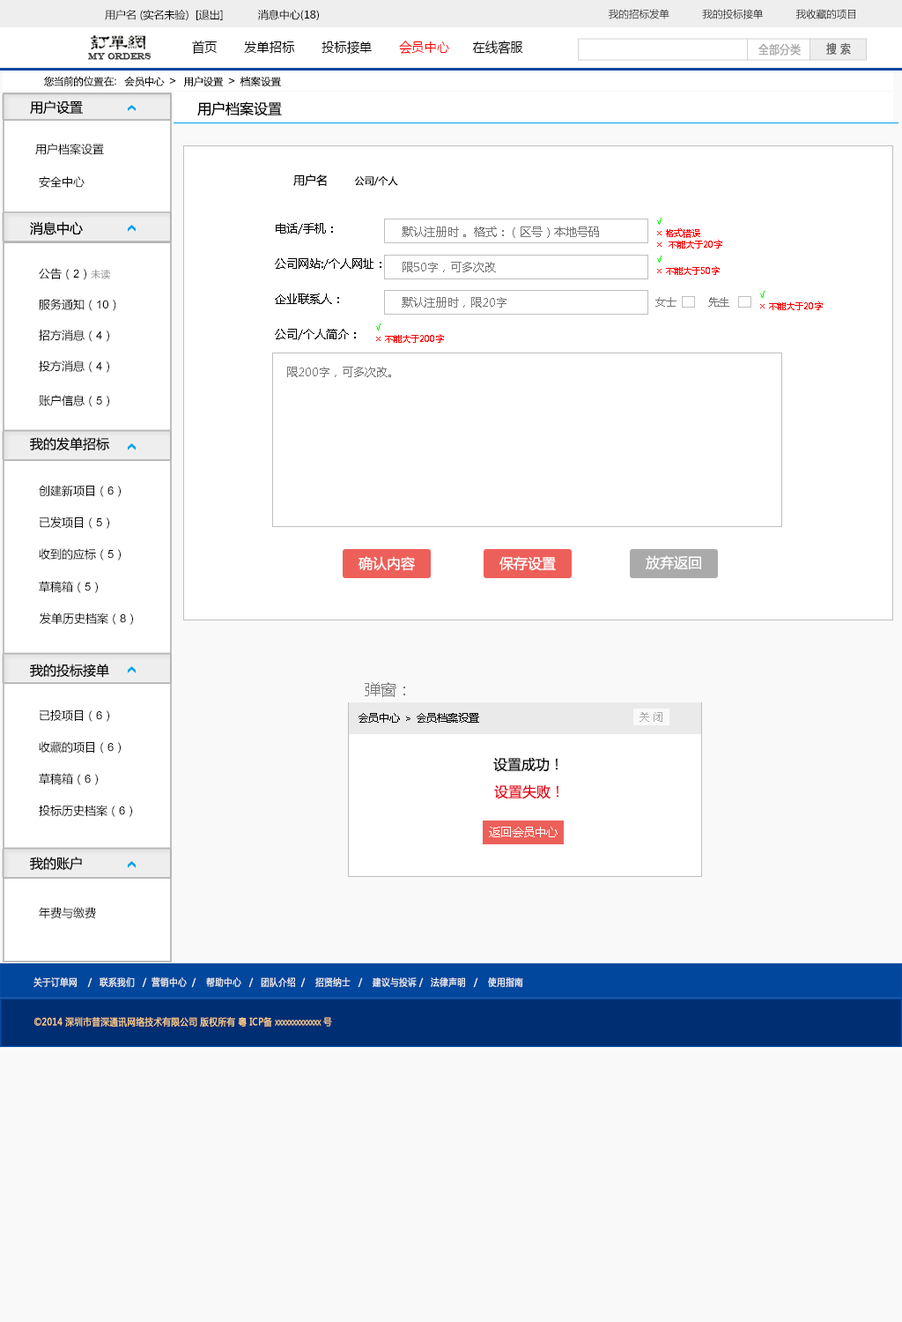
<style>
.page{position:relative;width:902px;height:1322px;background:#ffffff}
.page>*{position:absolute;margin:0}
.t1{font:10.6px "MicrosoftYaHei";color:#000000}
.t2{font:10.1px "MicrosoftYaHei";color:#000000}
.t3{font:13.6px "MicrosoftYaHei";color:#000000;font-variant:small-caps;scale:0.94 1}
.t4{font:13.6px "MicrosoftYaHei";color:#ff0000;font-variant:small-caps;scale:0.94 1}
.t5{font:8.7px "EngraversMT";color:#434343;font-variant:small-caps;font-weight:bold;scale:0.86 1}
.t6{font:11.6px "MicrosoftYaHei";color:#aaaaaa;font-variant:small-caps;font-weight:bold;scale:0.86 1}
.t7{font:11.6px "MicrosoftYaHei";color:#626262;font-variant:small-caps;font-weight:bold;scale:0.86 1}
.t8{font:10.6px "STXihei";color:#060606}
.t9{font:13.2px "MicrosoftYaHei";color:#060606}
.t10{font:14.1px "MicrosoftYaHei";color:#060606}
.t11{font:11.5px "MicrosoftYaHei";color:#060606}
.t12{font:9.7px "MicrosoftYaHei";color:#000000}
.t13{font:11.5px "MicrosoftYaHei";color:#000000}
.t14{font:8.8px/11.5px "MicrosoftYaHei";color:#ff0000}
.t15{font:8.8px/11.5px "MicrosoftYaHei";color:#00ff00}
.t16{font:11.5px/35.2px "MicrosoftYaHei";color:#000000}
.t17{font:11.5px/17.6px "MicrosoftYaHei";color:#000000}
.t18{font:11.5px/35.2px "MicrosoftYaHei";color:#787878}
.t19{font:11.5px "ArialMT";color:#060606}
.t20{font:9.7px "MicrosoftYaHei";color:#888584}
.t21{font:10.6px "MicrosoftYaHei";color:#787878}
.t22{font:11.5px "MicrosoftYaHei";color:#787878}
.t23{font:14.1px "MicrosoftYaHei";color:#ffffff}
.t24{font:15.9px "MicrosoftYaHei";color:#787878}
.t25{font:10.6px "MicrosoftYaHei";letter-spacing:0.01em;color:#000000}
.t26{font:10.6px "MicrosoftYaHei";color:#aaaaaa;scale:0.95 1}
.t27{font:14.1px "MicrosoftYaHei";color:#000000}
.t28{font:14.1px "MicrosoftYaHei";color:#e60012}
.t29{font:11.5px "MicrosoftYaHei";color:#ffffff}
.t30{font:9.7px "MicrosoftYaHei";color:#eeeeee;font-variant:small-caps;font-weight:bold;scale:0.86 1}
.t31{font:13.6px "STXihei";color:#eeeeee;font-variant:small-caps;font-weight:bold;scale:0.86 1}
.t32{font:9.7px "MicrosoftYaHei";color:#facd89;font-variant:small-caps;font-weight:bold;scale:0.87 1}
.t33{font:9.7px "MicrosoftYaHei";color:#eeeeee;font-variant:small-caps;font-weight:bold;scale:0.87 1}
</style>
<div class="page">
<p class="t1" style="left:105px;top:10px;width:214px;height:10px">用户名 (实名未验)  [退出]           消息中心(18)</p>
<p class="t2" style="left:609px;top:9px;width:247px;height:10px">我的招标发单           我的投标接单           我收藏的项目</p>
<p class="t3" style="left:192px;top:41px;width:331px;height:14px">首页       发单招标       投标接单       <span class="t4">会员中心</span>      在线客服</p>
<p class="t5" style="left:88px;top:53px;width:64px;height:7px">MY ORDERS</p>
<p class="t6" style="left:759px;top:43px;width:42px;height:13px">全部分类</p>
<p class="t7" style="left:826px;top:42px;width:25px;height:13px">搜 索</p>
<p class="t8" style="left:43px;top:76px;width:238px;height:11px">您当前的位置在：  会员中心  &gt;   用户设置  &gt;  档案设置</p>
<p class="t9" style="left:30px;top:100px;width:53px;height:15px">用户设置</p>
<p class="t10" style="left:197px;top:101px;width:85px;height:15px">用户档案设置</p>
<p class="t11" style="left:35px;top:143px;width:69px;height:12px">用户档案设置</p>
<p class="t11" style="left:39px;top:176px;width:46px;height:12px">安全中心</p>
<p class="t12" style="left:293px;top:174px;width:105px;height:12px"><span class="t13">用户名        </span>公司/个人</p>
<p class="t9" style="left:30px;top:221px;width:53px;height:14px">消息中心</p>
<p class="t14" style="left:657px;top:218px;width:65px;height:30px"><span class="t15">√<br></span>× 格式错误<br>×  不能大于20字</p>
<p class="t16" style="left:275px;top:223px;width:107px;height:117px"><span class="t17"><br></span><br>电话/手机：<br>公司网站:/个人网址：<br>企业联系人：<br>公司/个人简介：</p>
<p class="t18" style="left:402px;top:226px;width:197px;height:82px">默认注册时 。格式：（区号）本地号码<br>限50字，可多次改<br>默认注册时，限20字</p>
<p class="t14" style="left:657px;top:256px;width:63px;height:19px"><span class="t15">√<br></span>× 不能大于50字</p>
<p class="t11" style="left:39px;top:268px;width:71px;height:12px">公告（<span class="t19">2</span>）<span class="t20">未读</span></p>
<p class="t14" style="left:760px;top:291px;width:63px;height:19px"><span class="t15">√<br></span>× 不能大于20字</p>
<p class="t11" style="left:39px;top:299px;width:77px;height:12px">服务通知（<span class="t19">10</span>）</p>
<p class="t21" style="left:656px;top:297px;width:74px;height:10px">女士         先生</p>
<p class="t11" style="left:39px;top:330px;width:70px;height:12px">招方消息（<span class="t19">4</span>）</p>
<p class="t14" style="left:376px;top:323px;width:68px;height:20px"><span class="t15">√<br></span>× 不能大于200字</p>
<p class="t11" style="left:39px;top:360px;width:70px;height:13px">投方消息（<span class="t19">4</span>）</p>
<p class="t22" style="left:287px;top:367px;width:104px;height:10px">限200字，可多次改。</p>
<p class="t11" style="left:39px;top:395px;width:70px;height:12px">账户信息（<span class="t19">5</span>）</p>
<p class="t9" style="left:30px;top:437px;width:79px;height:14px">我的发单招标</p>
<p class="t11" style="left:39px;top:485px;width:82px;height:12px">创建新项目（<span class="t19">6</span>）</p>
<p class="t11" style="left:40px;top:516px;width:69px;height:13px">已发项目（<span class="t19">5</span>）</p>
<p class="t11" style="left:39px;top:548px;width:82px;height:12px">收到的应标（<span class="t19">5</span>）</p>
<p class="t23" style="left:359px;top:556px;width:56px;height:15px">确认内容</p>
<p class="t23" style="left:500px;top:556px;width:56px;height:15px">保存设置</p>
<p class="t23" style="left:646px;top:555px;width:55px;height:15px">放弃返回</p>
<p class="t11" style="left:39px;top:581px;width:59px;height:12px">草稿箱（<span class="t19">5</span>）</p>
<p class="t11" style="left:40px;top:612px;width:93px;height:13px">发单历史档案（<span class="t19">8</span>）</p>
<p class="t9" style="left:30px;top:663px;width:79px;height:15px">我的投标接单</p>
<p class="t24" style="left:365px;top:682px;width:40px;height:15px">弹窗：</p>
<p class="t11" style="left:40px;top:709px;width:69px;height:13px">已投项目（<span class="t19">6</span>）</p>
<p class="t25" style="left:359px;top:713px;width:120px;height:9px">会员中心 &gt; 会员档案设置</p>
<p class="t26" style="left:640px;top:712px;width:23px;height:10px">关 闭</p>
<p class="t11" style="left:39px;top:741px;width:82px;height:12px">收藏的项目（<span class="t19">6</span>）</p>
<p class="t27" style="left:493px;top:757px;width:66px;height:15px">设置成功！</p>
<p class="t11" style="left:39px;top:773px;width:59px;height:12px">草稿箱（<span class="t19">6</span>）</p>
<p class="t28" style="left:494px;top:784px;width:65px;height:15px">设置失败！</p>
<p class="t11" style="left:39px;top:804px;width:93px;height:13px">投标历史档案（<span class="t19">6</span>）</p>
<p class="t29" style="left:489px;top:826px;width:69px;height:11px">返回会员中心</p>
<p class="t9" style="left:30px;top:856px;width:52px;height:15px">我的账户</p>
<p class="t11" style="left:39px;top:907px;width:57px;height:11px">年费与缴费</p>
<p class="t30" style="left:33px;top:976px;width:490px;height:11px"><span class="t31"><br><br></span>关于订单网    /   联系我们   /  营销中心  /    帮助中心   /   团队介绍  /    招贤纳士   /    建议与投诉 /   法律声明   /    使用指南</p>
<p class="t32" style="left:34px;top:1017px;width:298px;height:9px"><span class="t33"> </span>©2014 深圳市普深通讯网络技术有限公司 版权所有 粤 ICP备 xxxxxxxxxxxxx 号</p>
</div>
